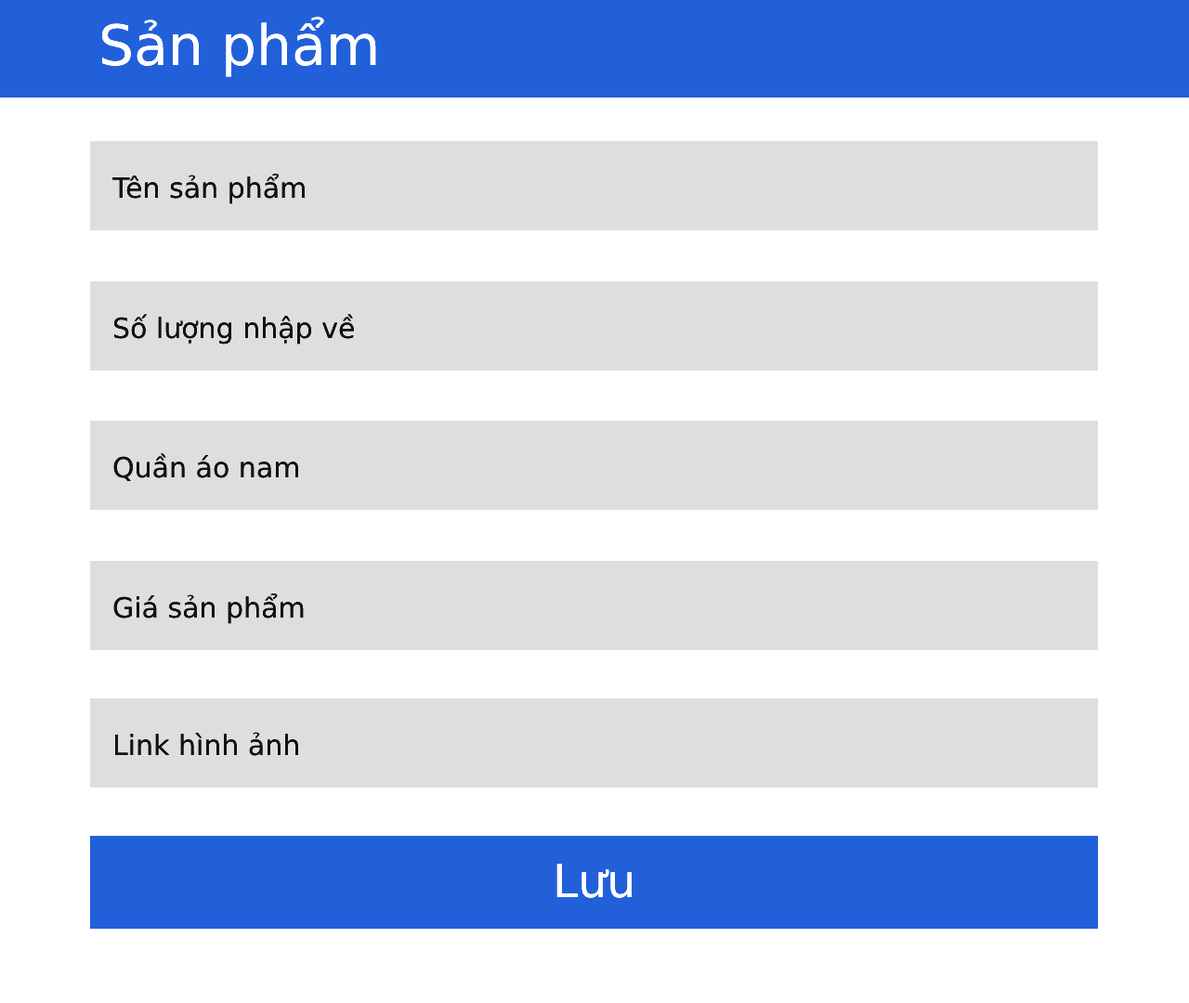
<style>
.page{position:relative;width:1189px;height:1003px;background:#ffffff}
.page>*{position:absolute;margin:0}
.t1{font:55.7px "DejaVuSans";color:#ffffff}
.t2{font:27.9px "DejaVuSans";color:#131313}
.t3{font:27.9px "DejaVuSans"}
.t4{font:45.5px "DejaVuSans";color:#ffffff}
</style>
<div class="page">
<p class="t1" style="left:101px;top:17px;width:275px;height:60px">Sản phẩm</p>
<p class="t2" style="left:111px;top:174px;width:194px;height:30px">Tên sản phẩm</p>
<p class="t2" style="left:113px;top:314px;width:241px;height:31px">Số lượng nhập về</p>
<p class="t2" style="left:113px;top:453px;width:185px;height:28px">Quần áo nam</p>
<p class="t3" style="left:111px;top:593px;width:194px;height:31px">Tên sản phẩm</p>
<p class="t2" style="left:113px;top:593px;width:191px;height:31px">Giá sản phẩm</p>
<p class="t2" style="left:114px;top:732px;width:184px;height:24px">Link hình ảnh</p>
<p class="t4" style="left:556px;top:864px;width:76px;height:34px">Lưu</p>
</div>
